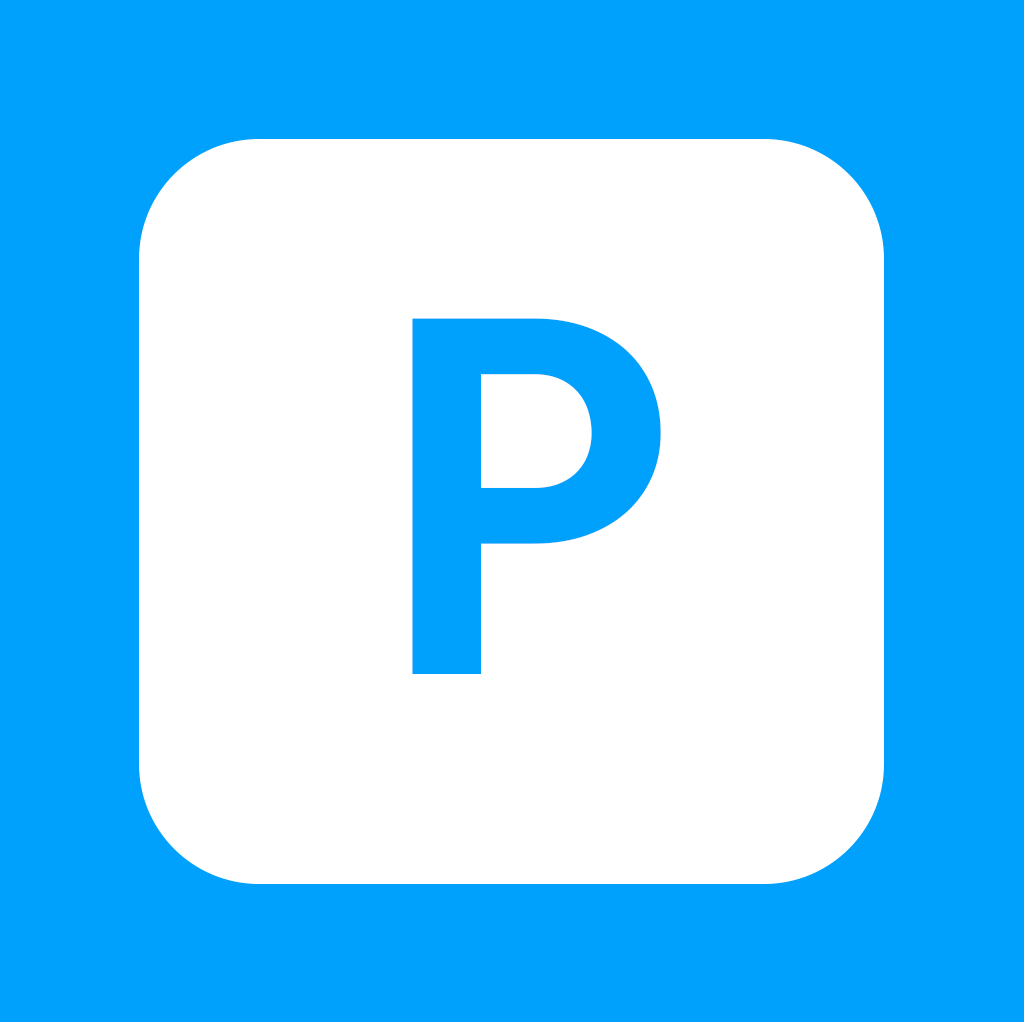
<style>
.page{position:relative;width:1024px;height:1022px;background:#00a1fd}
.page>*{position:absolute;margin:0}
.t1{font:500px "RobotoMonoForPowerline-Bold";color:#00a1fd}
</style>
<div class="page">
<p class="t1" style="left:412px;top:318px;width:249px;height:356px">P</p>
</div>
